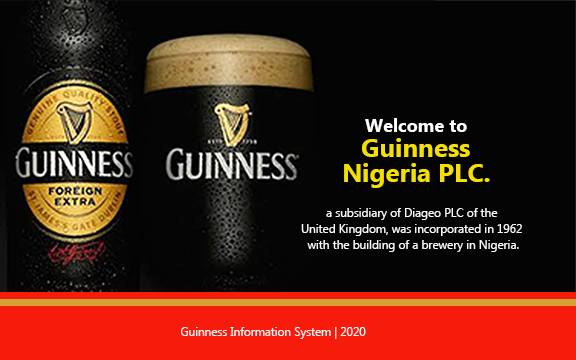
<style>
.page{position:relative;width:576px;height:360px;background:#040404}
.page>*{position:absolute;margin:0}
.t1{font:25.9px/25px "MicrosoftNewTaiLue-Bold";color:#f3df03}
.t2{font:18.1px/25px "MicrosoftNewTaiLue-Bold";color:#fffffc}
.t3{font:11.7px/16.2px "MicrosoftNewTaiLue";color:#faf9fa}
.t4{font:11.7px "MicrosoftNewTaiLue";color:#faf9fa}
</style>
<div class="page">
<p class="t1" style="left:344px;top:118px;width:146px;height:70px;text-align:center"><span class="t2">Welcome to<br> </span>Guinness <br>Nigeria PLC.</p>
<p class="t3" style="left:301px;top:208px;width:221px;height:44px;text-align:center">a subsidiary of Diageo PLC of the <br>United Kingdom, was incorporated in 1962 <br>with the building of a brewery in Nigeria.</p>
<p class="t4" style="left:181px;top:327px;width:185px;height:12px">Guinness Information System | 2020</p>
</div>
